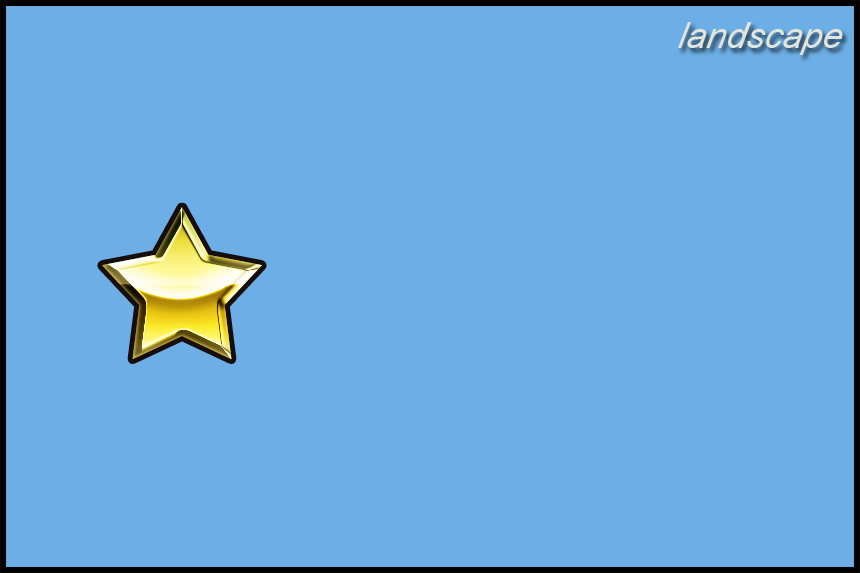
<style>
.page{position:relative;width:860px;height:573px;background:#6caee5}
.page>*{position:absolute;margin:0}
.t1{font:36px "Arial-ItalicMT";color:#e2e5dd;font-style:italic}
</style>
<div class="page">
<p class="t1" style="left:678px;top:22px;width:165px;height:33px">landscape</p>
</div>
